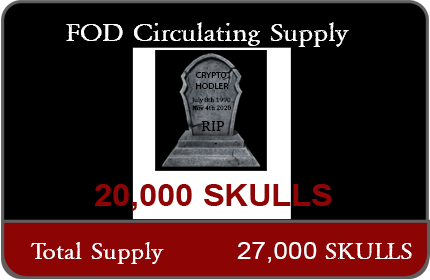
<style>
.page{position:relative;width:430px;height:280px;background:#000000}
.page>*{position:absolute;margin:0}
.t1{font:26.4px "NIGHTMAREPILLS";color:#ffffff;scale:1.09 1}
.t2{font:8.6px "MyriadPro-Regular";color:#000000;scale:1.09 1}
.t3{font:6.2px "Cambria";color:#000000;scale:1.09 1}
.t4{font:14.2px "Cambria";color:#000000;scale:1.09 1}
.t5{font:30px "Arial-BoldMT";color:#8f0404;scale:1.09 1}
.t6{font:24.3px "NIGHTMAREPILLS";color:#ffffff;scale:1.09 1}
.t7{font:24.3px "ArialMT";color:#ffffff;scale:1.09 1}
</style>
<div class="page">
<p class="t1" style="left:66px;top:22px;width:283px;height:25px">FOD Circulating Supply</p>
<p class="t2" style="left:196px;top:72px;width:33px;height:17px">CRYPTO<br>HODLER</p>
<p class="t3" style="left:192px;top:97px;width:39px;height:14px">July 8th 1990<br>Nov 4th 2020</p>
<p class="t4" style="left:202px;top:121px;width:22px;height:10px">RIP</p>
<p class="t5" style="left:95px;top:184px;width:237px;height:27px">20,000 SKULLS</p>
<p class="t6" style="left:30px;top:242px;width:382px;height:22px">Total Supply        <span class="t7">27,000 </span>SKULLS</p>
</div>
